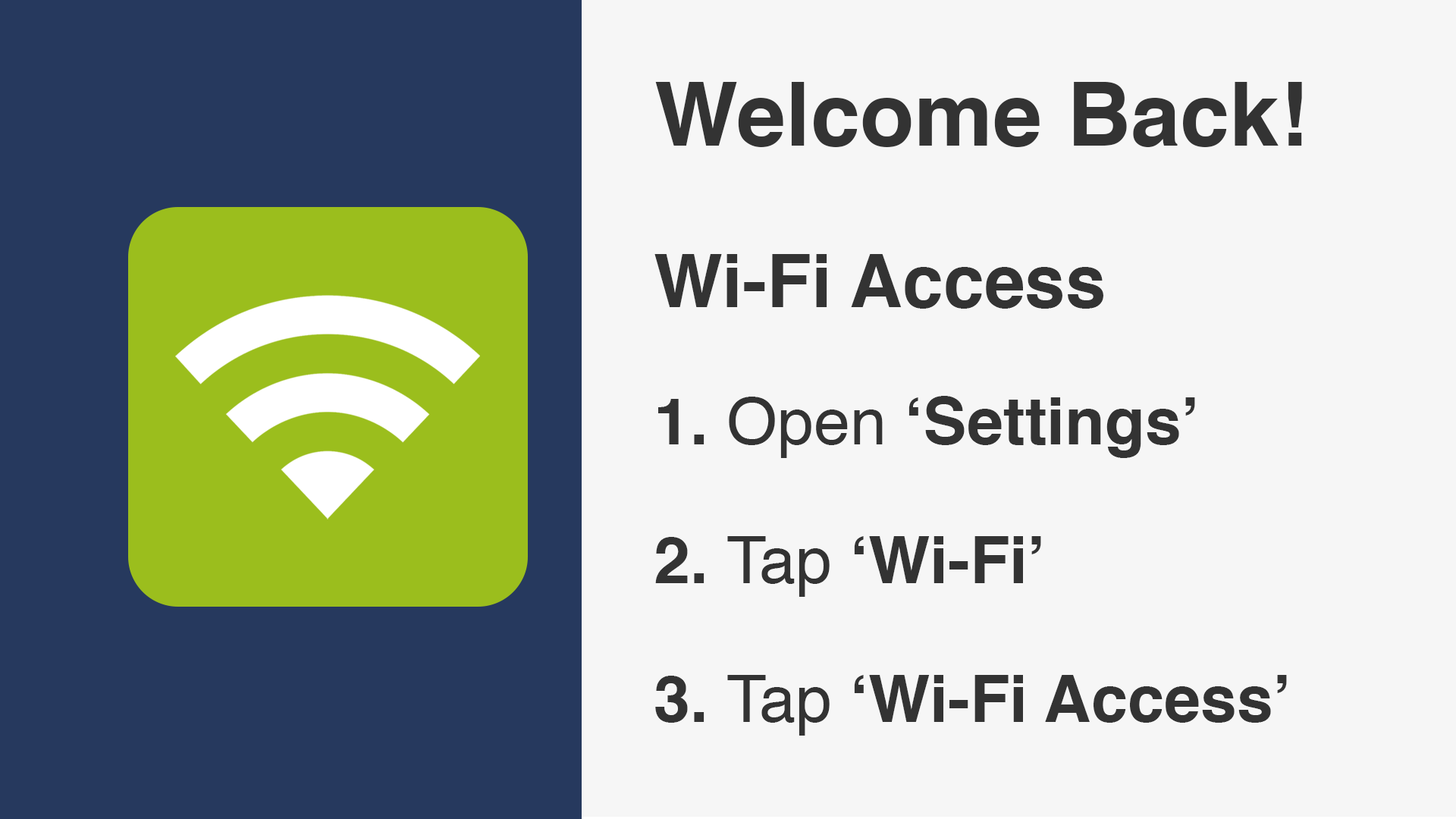
<style>
.page{position:relative;width:1456px;height:819px;background:#f6f6f6}
.page>*{position:absolute;margin:0}
.t1{font:88.6px "Helvetica-Bold";color:#333333}
.t2{font:73.2px "Helvetica-Bold";color:#333333}
.t3{font:65.5px/138.7px "Helvetica-Bold";color:#333333}
.t4{font:65.5px/138.7px "Helvetica";color:#333333}
</style>
<div class="page">
<p class="t1" style="left:655px;top:82px;width:647px;height:65px">Welcome Back!</p>
<p class="t2" style="left:654px;top:254px;width:449px;height:55px">Wi-Fi Access</p>
<p class="t3" style="left:655px;top:396px;width:632px;height:340px">1. <span class="t4">Open </span>‘Settings’<br>2. <span class="t4">Tap </span>‘Wi-Fi’<br>3. <span class="t4">Tap </span>‘Wi-Fi Access’</p>
</div>
